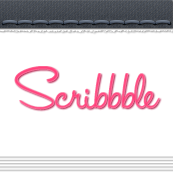
<style>
.page{position:relative;width:173px;height:173px;background:#ffffff}
.page>*{position:absolute;margin:0}
.t1{font:71.3px "RefreshmentStand";letter-spacing:-0.025em;color:#ff407a;font-weight:bold;scale:0.91 1}
</style>
<div class="page">
<p class="t1" style="left:14px;top:66px;width:146px;height:44px">Scribbble</p>
</div>
